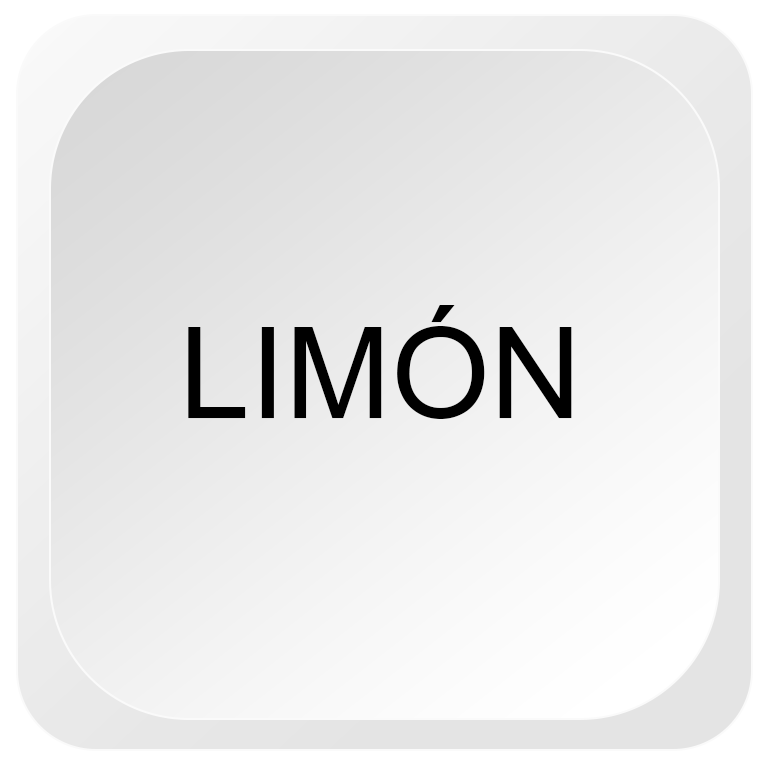
<style>
.page{position:relative;width:768px;height:768px}
.page>*{position:absolute;margin:0}
.t1{font:127px "ArialMT";color:#000000}
</style>
<div class="page">
<p class="t1" style="left:188px;top:305px;width:384px;height:114px">LIMÓN</p>
</div>
